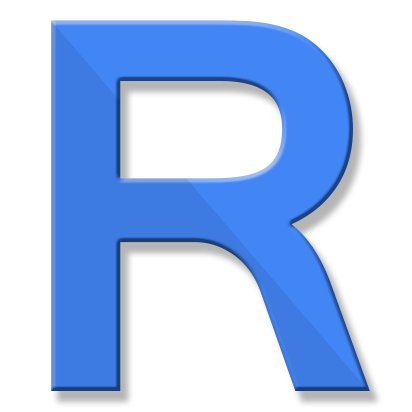
<style>
.page{position:relative;width:412px;height:412px;background:#ffffff}
.page>*{position:absolute;margin:0}
.t1{font:500px "Mangal-Bold";color:#4285f4}
</style>
<div class="page">
<p class="t1" style="left:51px;top:20px;width:319px;height:371px">R</p>
</div>
